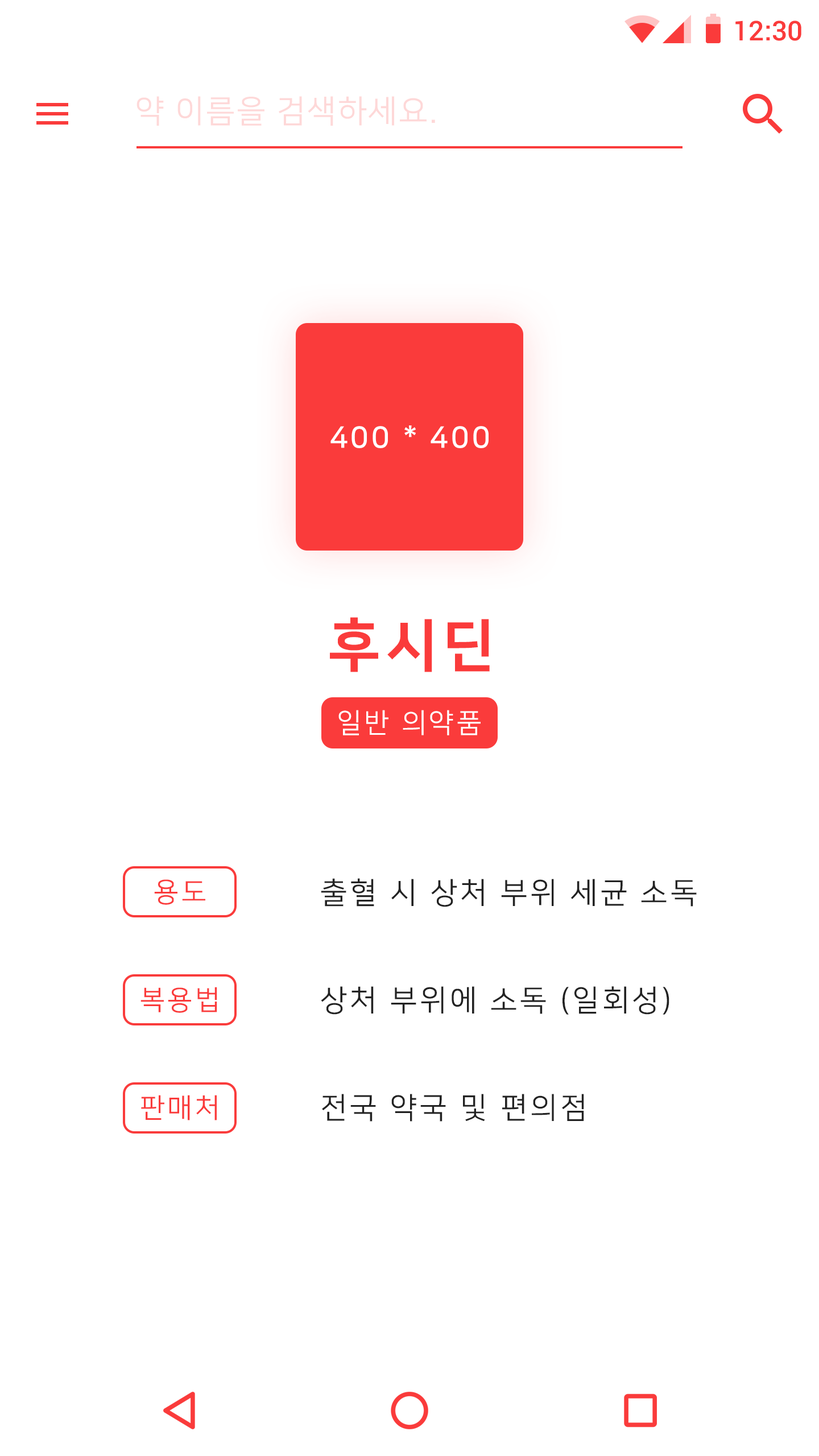
<style>
.page{position:relative;width:819px;height:1456px;background:#ffffff}
.page>*{position:absolute;margin:0}
.t1{font:27.3px "Roboto-Medium";color:#fa3b3b}
.t2{font:31.8px "NanumSquareR";letter-spacing:0.05em;color:#fed8d8}
.t3{font:29.6px "NanumSquareB";letter-spacing:0.1em;color:#ffffff}
.t4{font:56.9px "NanumSquareEB";letter-spacing:0.1em;color:#fa3b3b}
.t5{font:27.3px "NanumSquareR";letter-spacing:0.1em;color:#ffffff}
.t6{font:27.3px "NanumSquareR";letter-spacing:0.1em;color:#fa3b3b}
.t7{font:29.6px "NanumSquareR";letter-spacing:0.1em;color:#222222}
</style>
<div class="page">
<p class="t1" style="left:735px;top:20px;width:66px;height:21px">12:30</p>
<p class="t2" style="left:136px;top:96px;width:299px;height:30px">약 이름을 검색하세요.</p>
<p class="t3" style="left:330px;top:425px;width:159px;height:23px">400 * 400</p>
<p class="t4" style="left:330px;top:617px;width:160px;height:55px">후시딘</p>
<p class="t5" style="left:338px;top:710px;width:143px;height:25px">일반 의약품</p>
<p class="t6" style="left:154px;top:879px;width:51px;height:26px">용도</p>
<p class="t7" style="left:321px;top:878px;width:376px;height:29px">출혈 시 상처 부위 세균 소독</p>
<p class="t6" style="left:140px;top:987px;width:77px;height:26px">복용법</p>
<p class="t7" style="left:321px;top:986px;width:348px;height:29px">상처 부위에 소독 (일회성)</p>
<p class="t6" style="left:141px;top:1095px;width:76px;height:25px">판매처</p>
<p class="t7" style="left:322px;top:1094px;width:262px;height:28px">전국 약국 및 편의점</p>
</div>
